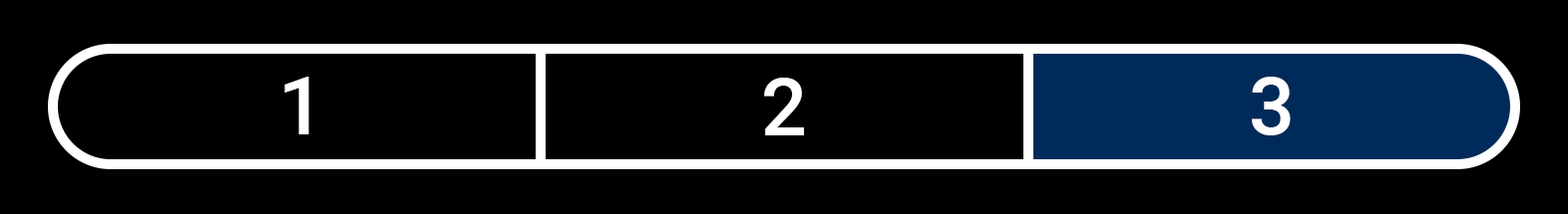
<style>
.page{position:relative;width:1568px;height:214px;background:#000000}
.page>*{position:absolute;margin:0}
.t1{font:80.3px "Roboto-Medium";color:#ffffff}
</style>
<div class="page">
<p class="t1" style="left:284px;top:77px;width:25px;height:58px">1</p>
<p class="t1" style="left:764px;top:78px;width:40px;height:58px">2</p>
<p class="t1" style="left:1252px;top:77px;width:39px;height:59px">3</p>
</div>
